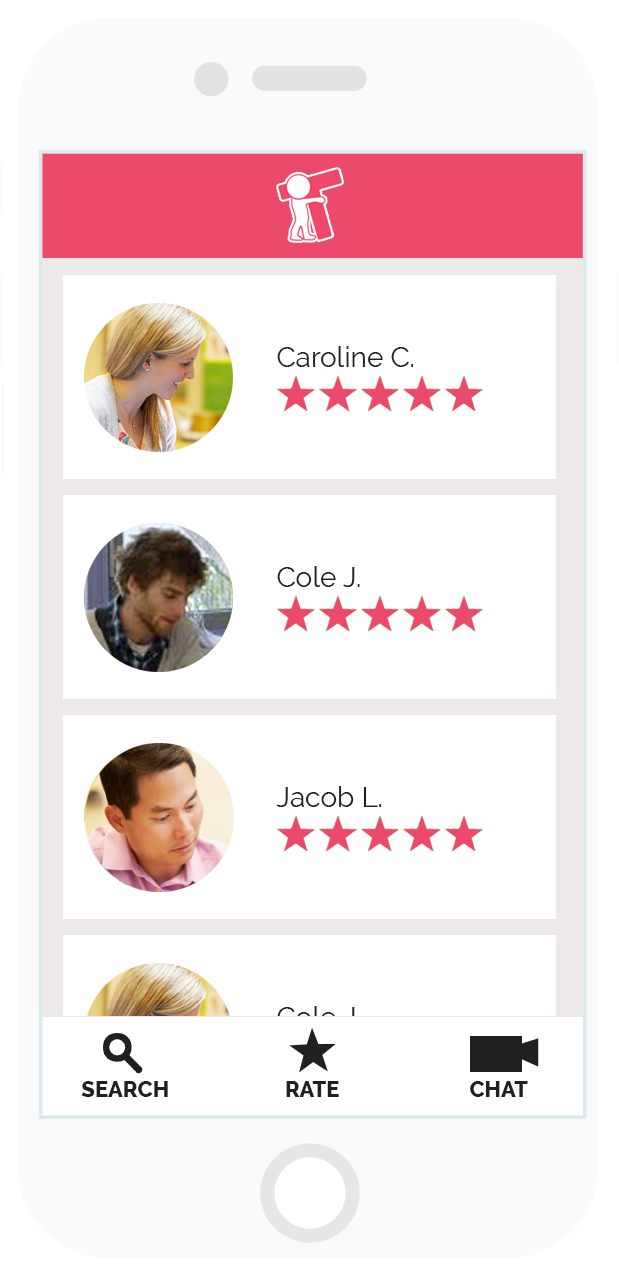
<style>
.page{position:relative;width:619px;height:1276px;background:#ffffff}
.page>*{position:absolute;margin:0}
.t1{font:28px "Raleway-Regular";color:#202020}
.t2{font:28px "Raleway-Regular"}
.t3{font:22px "Raleway-ExtraBold";color:#202020}
</style>
<div class="page">
<p class="t1" style="left:277px;top:346px;width:137px;height:21px">Caroline C.</p>
<p class="t1" style="left:277px;top:566px;width:83px;height:21px">Cole J.</p>
<p class="t1" style="left:276px;top:786px;width:106px;height:21px">Jacob L.</p>
<p class="t2" style="left:277px;top:1006px;width:83px;height:21px">Cole J.</p>
<p class="t3" style="left:81px;top:1081px;width:87px;height:16px">SEARCH</p>
<p class="t3" style="left:286px;top:1081px;width:53px;height:16px">RATE</p>
<p class="t3" style="left:470px;top:1081px;width:58px;height:16px">CHAT</p>
</div>
